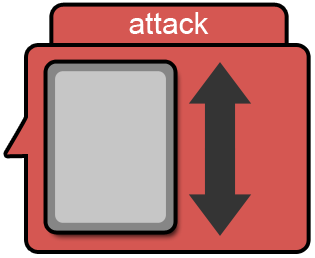
<style>
.page{position:relative;width:315px;height:258px;background:#d55752}
.page>*{position:absolute;margin:0}
.t1{font:30px "ArialMT";color:#ffffff}
</style>
<div class="page">
<p class="t1" style="left:129px;top:12px;width:80px;height:22px">attack</p>
</div>
